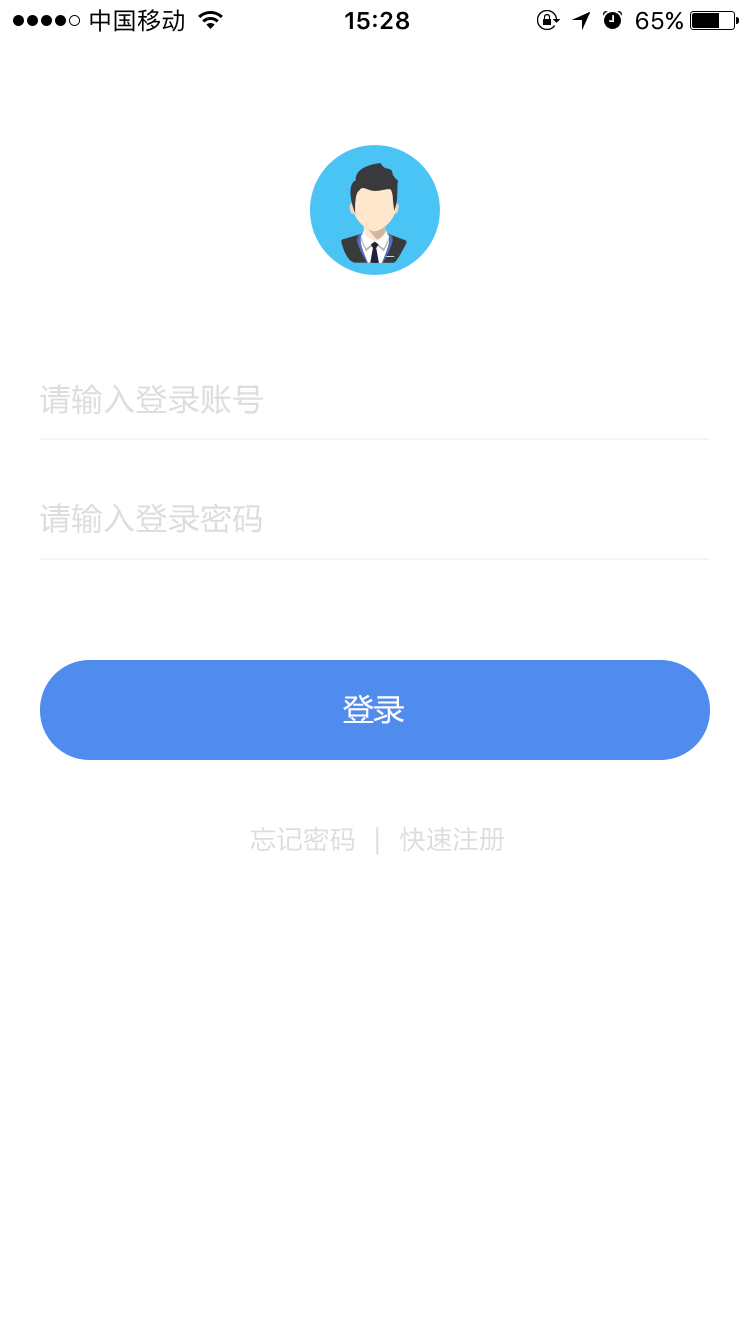
<style>
.page{position:relative;width:750px;height:1334px;background:#ffffff}
.page>*{position:absolute;margin:0}
.t1{font:30.7px "MicrosoftYaHei";letter-spacing:0.05em;color:#dddddd}
.t2{font:30.7px "MicrosoftYaHei";color:#ffffff}
.t3{font:25.3px "MicrosoftYaHei";letter-spacing:0.05em;color:#dddddd}
</style>
<div class="page">
<p class="t1" style="left:40px;top:384px;width:223px;height:31px">请输入登录账号</p>
<p class="t1" style="left:40px;top:503px;width:222px;height:31px">请输入登录密码</p>
<p class="t2" style="left:343px;top:694px;width:61px;height:30px">登录</p>
<p class="t3" style="left:250px;top:826px;width:255px;height:29px">忘记密码  |  快速注册</p>
</div>
